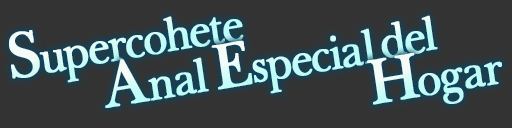
<style>
.page{position:relative;width:512px;height:128px;background:#333333}
.page>*{position:absolute;margin:0}
.t1{font:54px "BaskervilleLight";letter-spacing:-0.06em;color:#ccfcf8;font-weight:bold;scale:0.93 1}
.t2{font:75px "BaskervilleLight";letter-spacing:-0.06em;color:#ccfcf8;font-weight:bold;scale:0.93 1}
.t3{font:54px "BaskervilleLight";letter-spacing:-0.06em;font-weight:bold;scale:0.93 1}
.t4{font:54px "BaskervilleLight";letter-spacing:-0.06em;color:#c3fcf8;font-weight:bold;scale:0.93 1}
.t5{font:75px "BaskervilleLight";letter-spacing:-0.06em;color:#c3fcf8;font-weight:bold;scale:0.93 1}
.t6{font:75px "BaskervilleLight";letter-spacing:-0.06em;font-weight:bold;scale:0.93 1}
.t7{font:54px "BaskervilleLight";letter-spacing:-0.06em;color:#c1fcf8;font-weight:bold;scale:0.94 1}
.t8{font:75px "BaskervilleLight";letter-spacing:-0.06em;color:#c1fcf8;font-weight:bold;scale:0.94 1}
</style>
<div class="page">
<p class="t1" style="left:9px;top:16px;width:235px;height:67px;rotate:-10deg"><span class="t2">S</span>upercohete</p>
<p class="t3" style="left:381px;top:15px;width:57px;height:43px;rotate:-10deg">del</p>
<p class="t4" style="left:211px;top:28px;width:166px;height:66px;rotate:-10deg"><span class="t5">E</span>special</p>
<p class="t3" style="left:367px;top:53px;width:135px;height:52px;rotate:-10deg"><span class="t6">H</span>ogar</p>
<p class="t7" style="left:105px;top:57px;width:104px;height:51px;rotate:-10deg"><span class="t8">A</span>nal</p>
</div>
